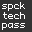
<style>
.page{position:relative;width:32px;height:32px;background:#333333}
.page>*{position:absolute;margin:0}
.t1{font:9px/8.4px "Monaco";letter-spacing:0.06em;color:#ffffff}
.t2{font:9px/10.4px "Monaco";letter-spacing:0.06em;color:#ffffff}
</style>
<div class="page">
<p class="t1" style="left:2px;top:2px;width:23px;height:28px">spck<br><span class="t2">tech<br></span>pass</p>
</div>
